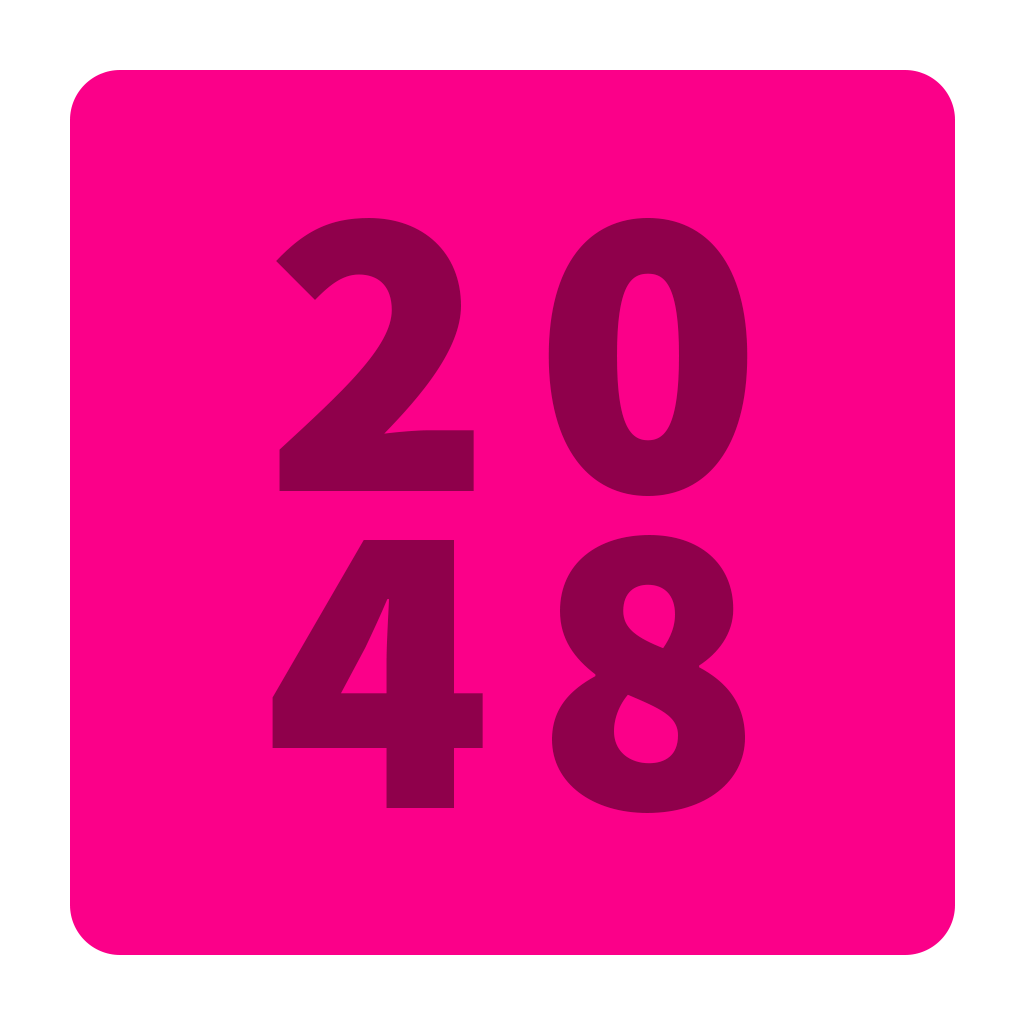
<style>
.page{position:relative;width:1024px;height:1024px;background:#fb0089}
.page>*{position:absolute;margin:0}
.t1{font:421.9px "SourceSansPro-Black";letter-spacing:0.1em;color:#8f004b}
.t2{font:421.9px/316.5px "SourceSansPro-Black";letter-spacing:0.1em;color:#8f004b}
</style>
<div class="page">
<p class="t1" style="left:272px;top:217px;width:476px;height:596px;text-align:center">20<br><span class="t2">48</span></p>
</div>
